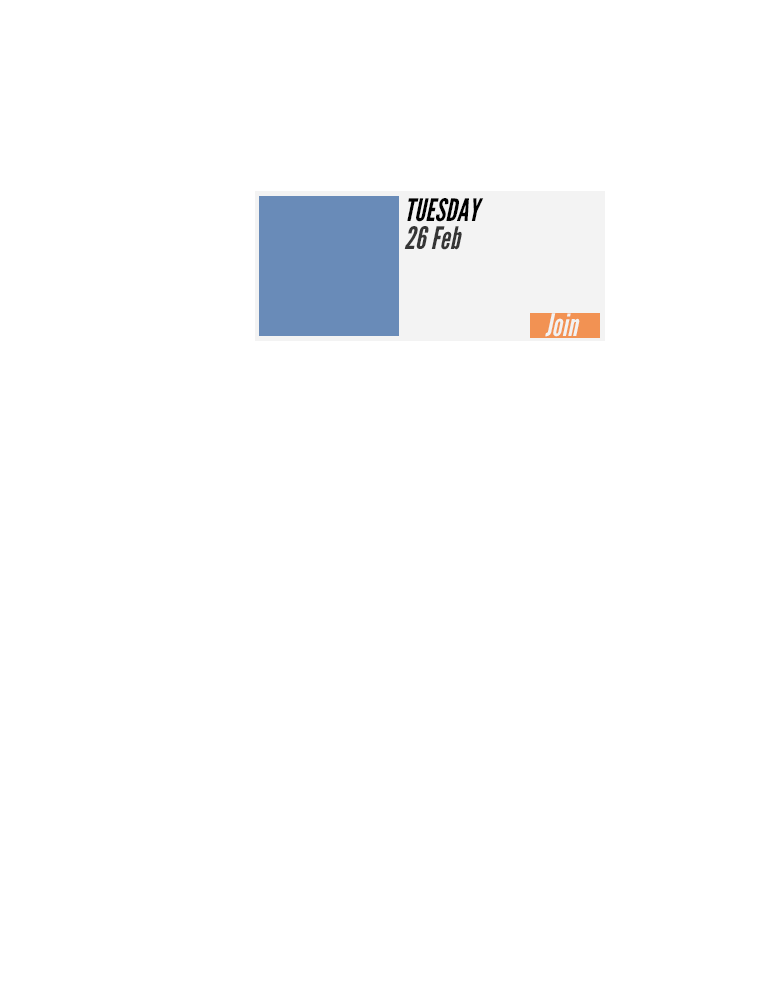
<style>
.page{position:relative;width:768px;height:1000px;background:#ffffff}
.page>*{position:absolute;margin:0}
.t1{font:30.9px/24px "LeagueGothic-Italic";color:#000000}
.t2{font:30.9px/24px "LeagueGothic-Italic";color:#353535}
.t3{font:30.9px "LeagueGothic-Italic";color:#f2f2f2}
</style>
<div class="page">
<p class="t1" style="left:404px;top:198px;width:80px;height:52px">TUESDAY<br><span class="t2">26 Feb</span></p>
<p class="t3" style="left:545px;top:313px;width:35px;height:24px">Join</p>
</div>
